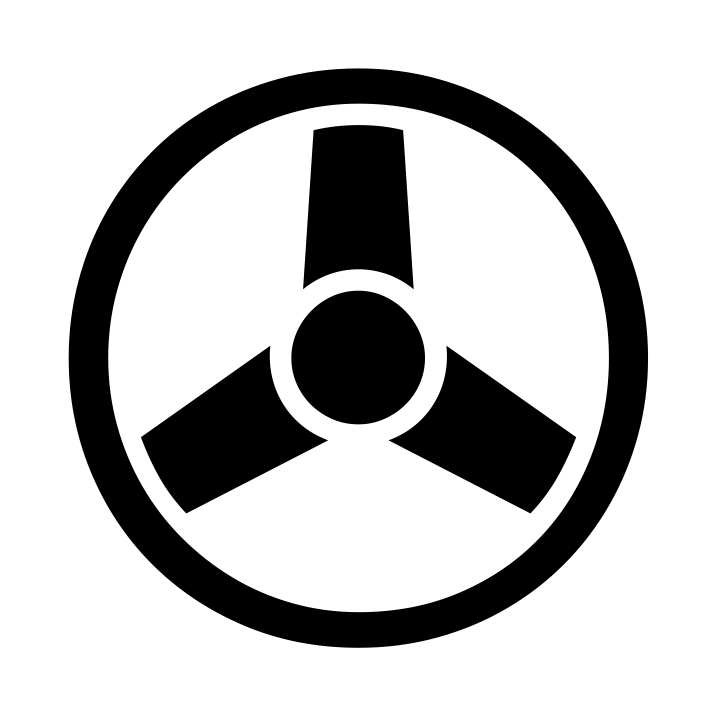
<style>
.page{position:relative;width:720px;height:720px;background:#ffffff}
.page>*{position:absolute;margin:0}
.t1{font:800px "SegoeUISymbol";letter-spacing:0.01em;color:#000000}
</style>
<div class="page">
<p class="t1" style="left:68px;top:68px;width:581px;height:580px">✇</p>
</div>
